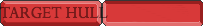
<style>
.page{position:relative;width:203px;height:26px;background:#d83939}
.page>*{position:absolute;margin:0}
.t1{font:18px "Perpetua";color:#741a1a}
</style>
<div class="page">
<p class="t1" style="left:0px;top:6px;width:108px;height:13px">TARGET HULL</p>
</div>
